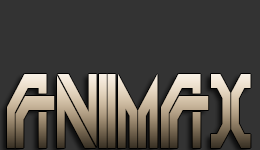
<style>
.page{position:relative;width:260px;height:150px;background:#333333}
.page>*{position:absolute;margin:0}
.t1{font:103.3px "DEPLETEDURANIUM";scale:0.53 1}
</style>
<div class="page">
<p class="t1" style="left:7px;top:74px;width:244px;height:74px">ANIMAX</p>
</div>
